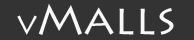
<style>
.page{position:relative;width:194px;height:40px;background:#333333}
.page>*{position:absolute;margin:0}
.t1{font:42.6px "LithosPro-Regular";color:#f8f8f8}
.t2{font:30.2px "LithosPro-Regular";color:#f8f8f8}
</style>
<div class="page">
<p class="t1" style="left:17px;top:3px;width:157px;height:32px"><span class="t2">v</span>Malls</p>
</div>
